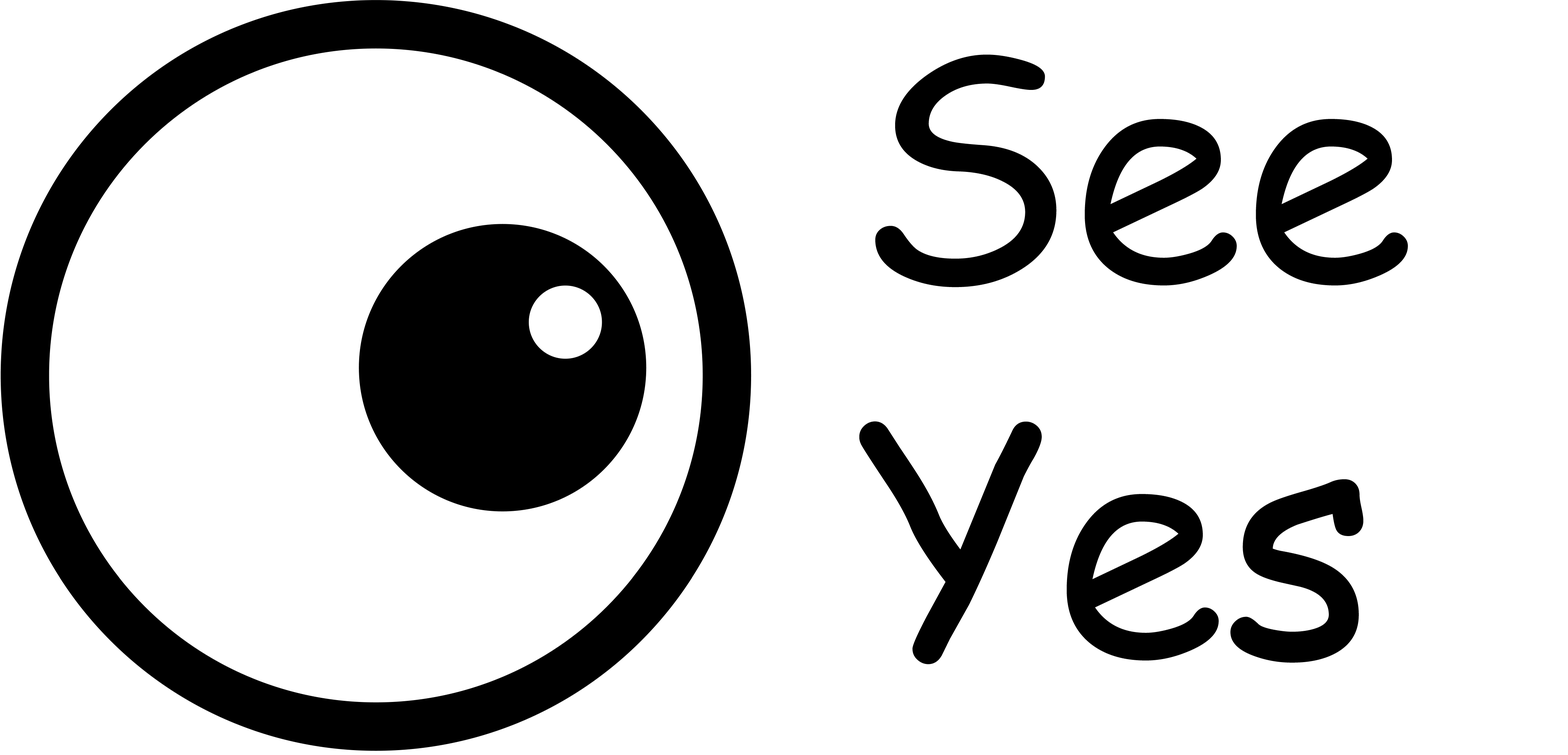
<style>
.page{position:relative;width:1568px;height:755px;background:#ffffff}
.page>*{position:absolute;margin:0}
.t1{font:312.3px "ComicSansMS";color:#000000}
</style>
<div class="page">
<p class="t1" style="left:859px;top:55px;width:549px;height:609px">See<br>Yes</p>
</div>
